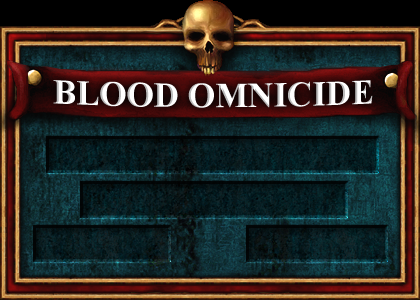
<style>
.page{position:relative;width:420px;height:300px}
.page>*{position:absolute;margin:0}
.t1{font:35px "TimesNewRomanPS-BoldMT";color:#ffffff;text-transform:uppercase}
</style>
<div class="page">
<p class="t1" style="left:53px;top:80px;width:320px;height:28px">Blood Omnicide</p>
</div>
